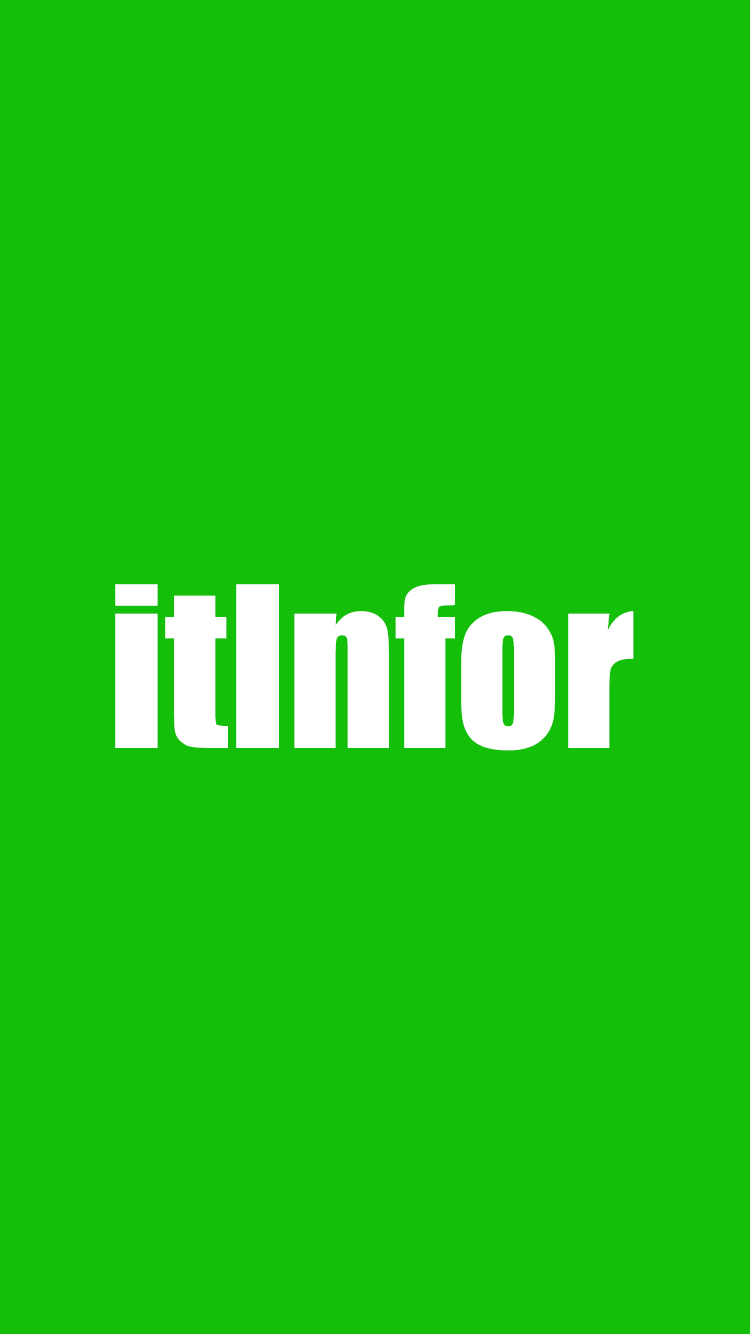
<style>
.page{position:relative;width:750px;height:1334px;background:#14bf0a}
.page>*{position:absolute;margin:0}
.t1{font:206.8px "Impact";color:#ffffff}
</style>
<div class="page">
<p class="t1" style="left:115px;top:584px;width:519px;height:167px">itInfor</p>
</div>
